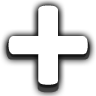
<style>
.page{position:relative;width:96px;height:96px;background:#ffffff}
.page>*{position:absolute;margin:0}
.t1{font:164px "Calibri-Bold";color:#ffffff;scale:1.05 1}
</style>
<div class="page">
<p class="t1" style="left:9px;top:6px;width:78px;height:78px">+</p>
</div>
